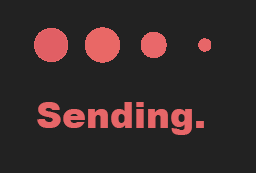
<style>
.page{position:relative;width:256px;height:173px;background:#222222}
.page>*{position:absolute;margin:0}
.t1{font:36px "Arial-Black";color:#e76668}
</style>
<div class="page">
<p class="t1" style="left:37px;top:102px;width:167px;height:33px">Sending.</p>
</div>
